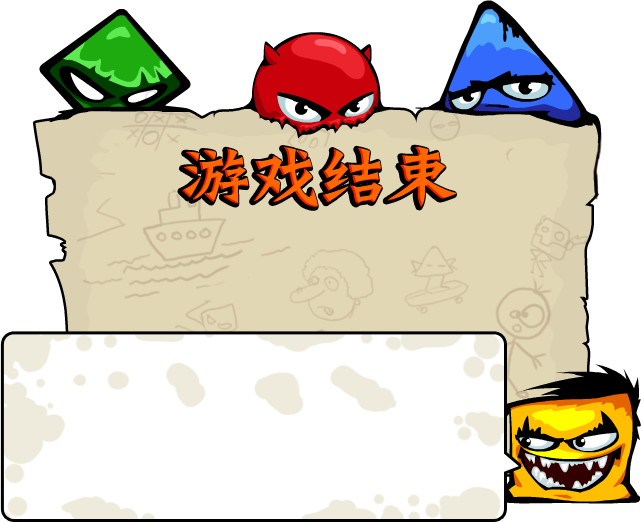
<style>
.page{position:relative;width:641px;height:522px;background:#ffffff}
.page>*{position:absolute;margin:0}
.t1{font:66.9px "JSuHun1";letter-spacing:-0.025em;scale:1.1 1}
.t2{font:66.9px "JSuHun1";letter-spacing:-0.025em;color:#ff6600;scale:1.1 1}
</style>
<div class="page">
<p class="t1" style="left:180px;top:147px;width:274px;height:61px">游戏结束</p>
<p class="t2" style="left:182px;top:146px;width:274px;height:61px">游戏结束</p>
</div>
